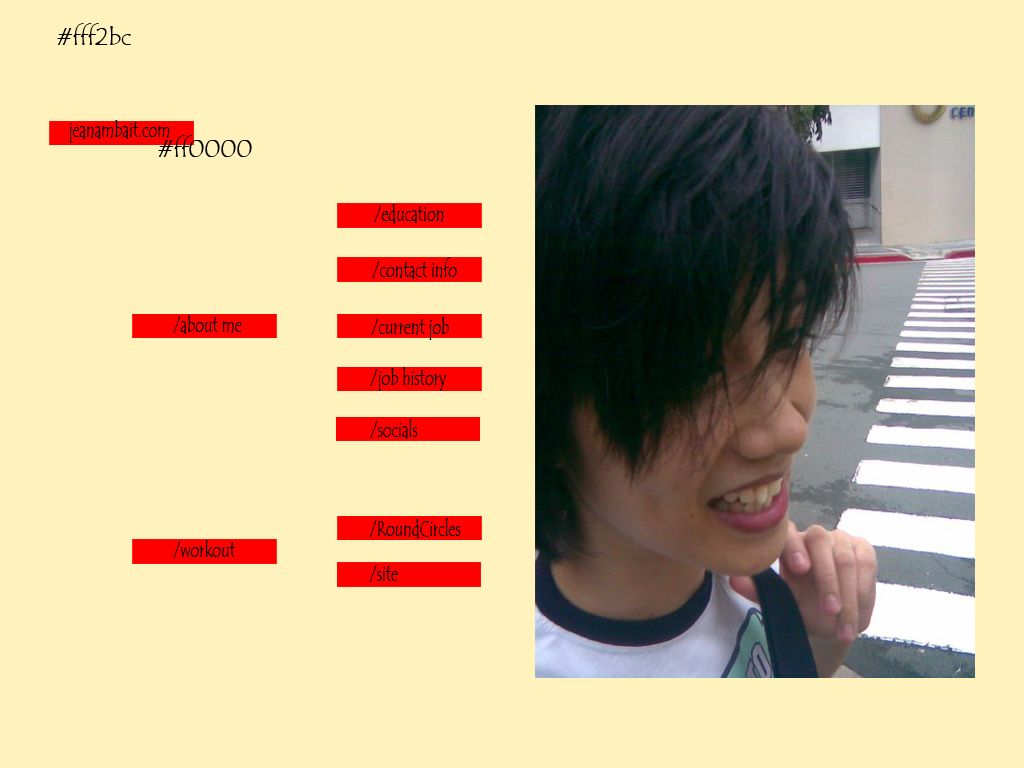
<style>
.page{position:relative;width:1024px;height:768px;background:#fff2bc}
.page>*{position:absolute;margin:0}
.t1{font:24px "TempusSansITC";color:#000000}
.t2{font:21.7px "TempusSansITC";color:#000000;scale:0.7 1}
</style>
<div class="page">
<p class="t1" style="left:57px;top:23px;width:74px;height:22px">#fff2bc</p>
<p class="t2" style="left:70px;top:120px;width:100px;height:23px">jeanambait.com</p>
<p class="t1" style="left:158px;top:135px;width:94px;height:22px">#ff0000</p>
<p class="t2" style="left:374px;top:204px;width:70px;height:20px">/education</p>
<p class="t2" style="left:372px;top:257px;width:85px;height:22px">/contact info</p>
<p class="t2" style="left:173px;top:315px;width:69px;height:19px">/about me</p>
<p class="t2" style="left:371px;top:317px;width:78px;height:23px">/current job</p>
<p class="t2" style="left:370px;top:367px;width:77px;height:24px">/job history</p>
<p class="t2" style="left:370px;top:419px;width:48px;height:20px">/socials</p>
<p class="t2" style="left:369px;top:518px;width:92px;height:21px">/RoundCircles</p>
<p class="t2" style="left:173px;top:540px;width:62px;height:18px">/workout</p>
<p class="t2" style="left:369px;top:565px;width:29px;height:17px">/site</p>
</div>
